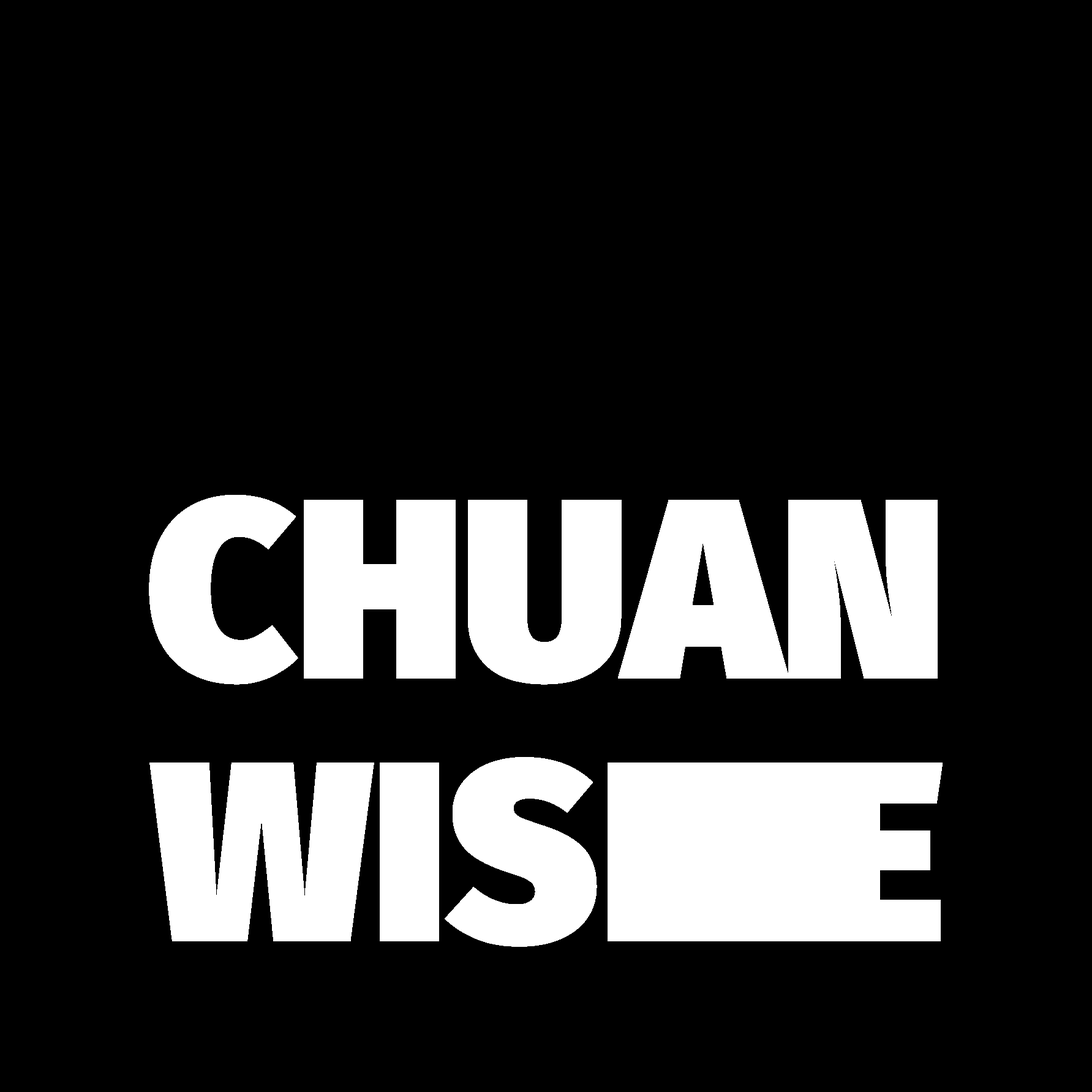
<style>
.page{position:relative;width:1092px;height:1092px;background:#000000}
.page>*{position:absolute;margin:0}
.t1{font:255.3px/262.3px "FiraSans-Ultra";color:#ffffff}
</style>
<div class="page">
<p class="t1" style="left:149px;top:495px;width:794px;height:452px;text-align:right">CHUAN<br>WIS    E</p>
</div>
